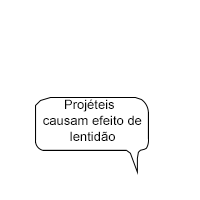
<style>
.page{position:relative;width:200px;height:200px;background:#ffffff}
.page>*{position:absolute;margin:0}
.t1{font:13px "ArialMT";color:#000000}
</style>
<div class="page">
<p class="t1" style="left:43px;top:99px;width:99px;height:42px;text-align:center">Projéteis causam efeito de lentidão</p>
</div>
